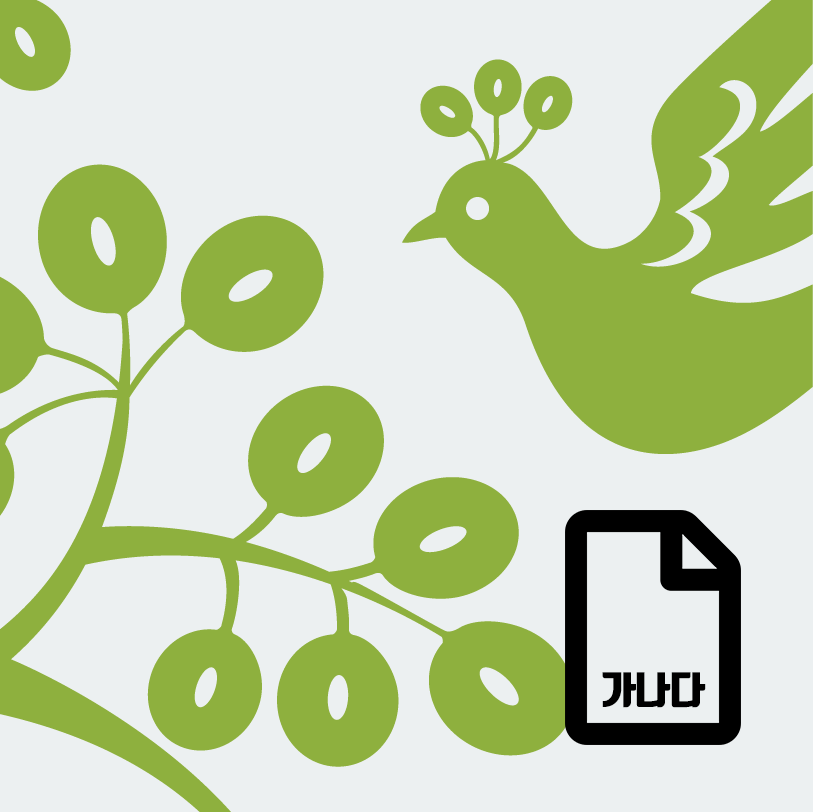
<style>
.page{position:relative;width:813px;height:812px;background:#ecf0f1}
.page>*{position:absolute;margin:0}
.t1{font:38.2px "TmonMonsoriBlack";color:#000000}
</style>
<div class="page">
<p class="t1" style="left:602px;top:672px;width:104px;height:36px">가나다</p>
</div>
